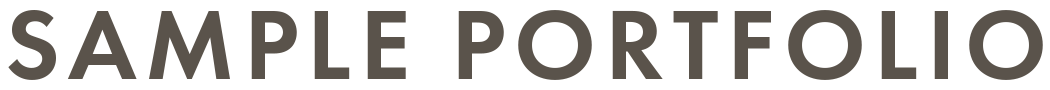
<style>
.page{position:relative;width:1050px;height:90px;background:#ffffff}
.page>*{position:absolute;margin:0}
.t1{font:102.7px "FuturaPT-Demi";letter-spacing:0.075em;color:#5a534b;text-transform:uppercase}
</style>
<div class="page">
<p class="t1" style="left:8px;top:10px;width:1035px;height:70px">Sample Portfolio</p>
</div>
